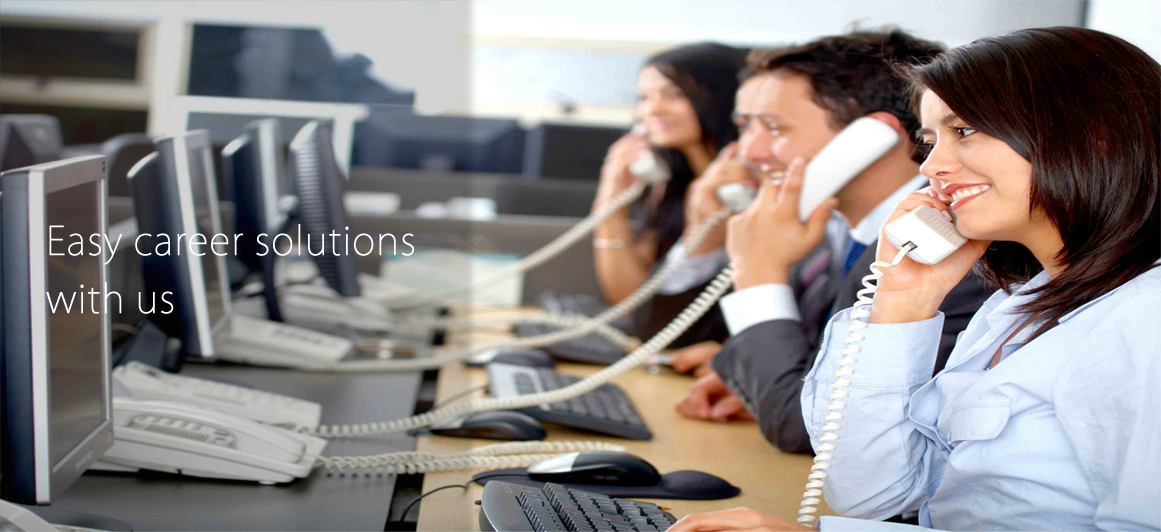
<style>
.page{position:relative;width:1161px;height:532px}
.page>*{position:absolute;margin:0}
.t1{font:38.8px/29px "KozGoPr6N-ExtraLight";color:#ffffff;font-weight:bold}
</style>
<div class="page">
<p class="t1" style="left:46px;top:224px;width:368px;height:90px;text-align:justify">Easy career solutions <br><br>with us</p>
</div>
